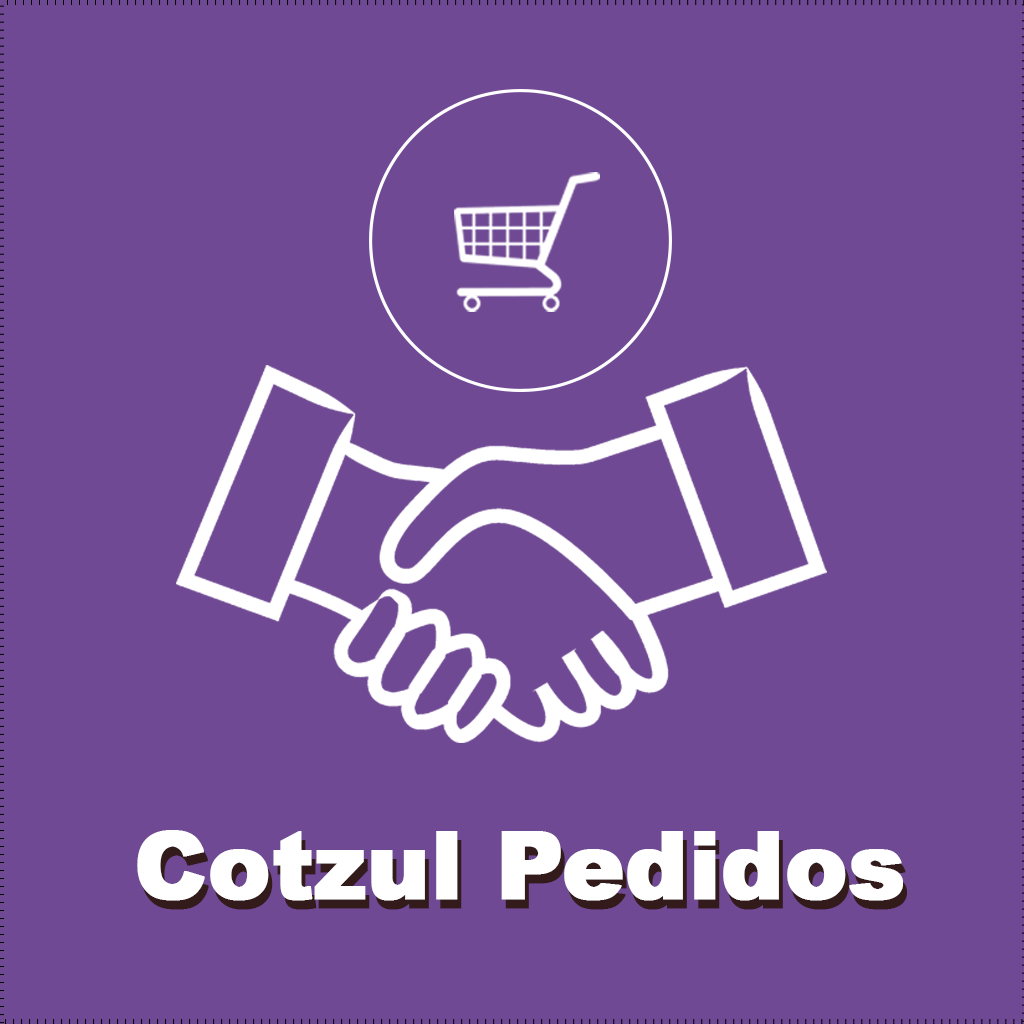
<style>
.page{position:relative;width:1024px;height:1024px;background:#6f4993}
.page>*{position:absolute;margin:0}
.t1{font:92.8px "Arial-Black";letter-spacing:-0.01em;color:#ffffff;font-weight:bold}
</style>
<div class="page">
<p class="t1" style="left:137px;top:830px;width:766px;height:71px">Cotzul Pedidos</p>
</div>
